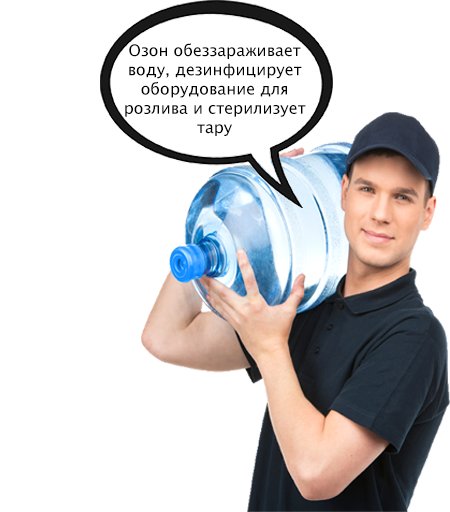
<style>
.page{position:relative;width:450px;height:512px;background:#ffffff}
.page>*{position:absolute;margin:0}
.t1{font:16px "LucidaSansUnicode";color:#000000}
</style>
<div class="page">
<p class="t1" style="left:125px;top:43px;width:181px;height:93px;text-align:center">Озон обеззараживает воду, дезинфицирует оборудование для розлива и стерилизует тару</p>
</div>
